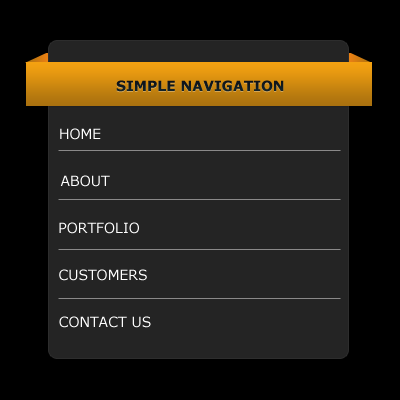
<style>
.page{position:relative;width:400px;height:400px;background:#242424}
.page>*{position:absolute;margin:0}
.t1{font:14px "Verdana-Bold";color:#111f26;text-transform:uppercase}
.t2{font:14px "Verdana-Bold";color:#10191f;text-transform:uppercase}
.t3{font:14px "Verdana";color:#ffffff;text-transform:uppercase}
</style>
<div class="page">
<p class="t1" style="left:116px;top:81px;width:168px;height:12px">sIMPLE NAVIGATION</p>
<p class="t2" style="left:116px;top:80px;width:168px;height:12px">sIMPLE NAVIGATION</p>
<p class="t3" style="left:60px;top:128px;width:41px;height:12px">HOME</p>
<p class="t3" style="left:60px;top:175px;width:50px;height:12px">ABOUT</p>
<p class="t3" style="left:59px;top:222px;width:80px;height:12px">PORTFOLIO</p>
<p class="t3" style="left:59px;top:269px;width:88px;height:12px">CUSTOMERS</p>
<p class="t3" style="left:59px;top:316px;width:92px;height:12px">CONTACT US</p>
</div>
